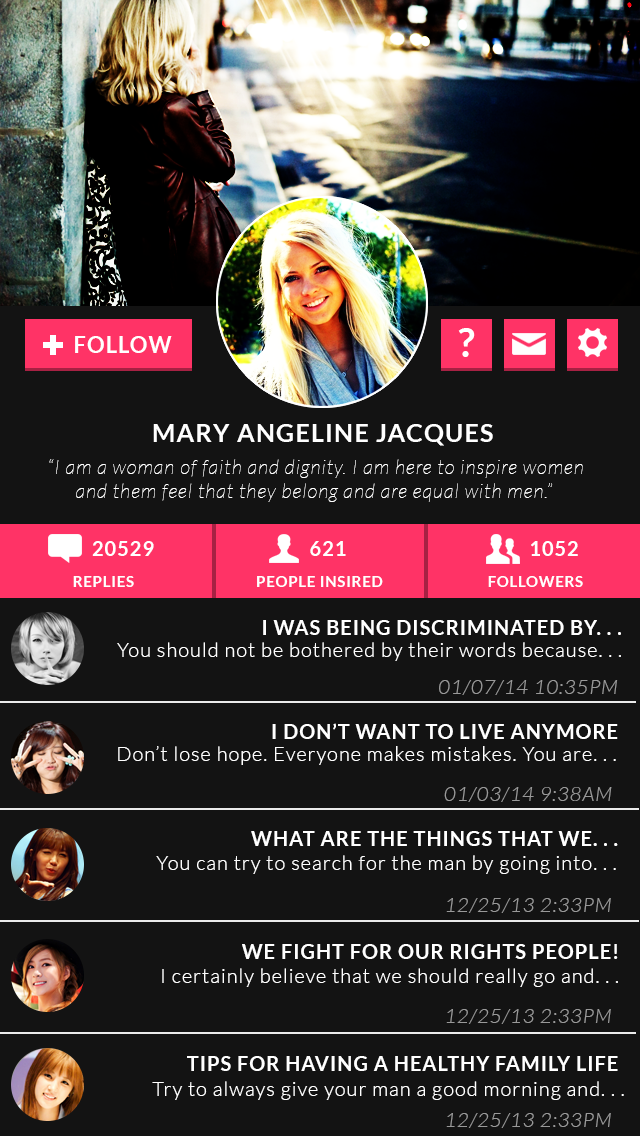
<style>
.page{position:relative;width:640px;height:1136px;background:#131313}
.page>*{position:absolute;margin:0}
.t1{font:40px "Lato-Bold";letter-spacing:0.05em;color:#ffffff}
.t2{font:22px "Lato-Bold";letter-spacing:0.05em;color:#ffffff}
.t3{font:25px "Lato-Bold";letter-spacing:0.05em;color:#ffffff}
.t4{font:20px "Lato-HairlineItalic";letter-spacing:0.05em;color:#ffffff}
.t5{font:20px "Lato-Bold";letter-spacing:0.05em;color:#ffffff}
.t6{font:15px "Lato-Bold";letter-spacing:0.05em;color:#ffffff}
.t7{font:20px "Lato-Light";letter-spacing:0.05em;color:#ffffff}
.t8{font:20px "Lato-LightItalic";letter-spacing:0.05em;color:#999999}
</style>
<div class="page">
<p class="t1" style="left:458px;top:328px;width:17px;height:29px">?</p>
<p class="t2" style="left:75px;top:336px;width:97px;height:17px">FOLLOW</p>
<p class="t3" style="left:153px;top:424px;width:340px;height:22px">MARY ANGELINE JACQUES</p>
<p class="t4" style="left:49px;top:459px;width:534px;height:43px;text-align:center">“I am a woman of faith and dignity. I am here to inspire women<br>and them feel that they belong and are equal with men.”</p>
<p class="t5" style="left:92px;top:541px;width:62px;height:15px">20529</p>
<p class="t5" style="left:310px;top:541px;width:36px;height:15px">621</p>
<p class="t5" style="left:531px;top:541px;width:47px;height:15px">1052</p>
<p class="t6" style="left:73px;top:576px;width:61px;height:11px">REPLIES</p>
<p class="t6" style="left:257px;top:576px;width:126px;height:11px">PEOPLE INSIRED</p>
<p class="t6" style="left:488px;top:576px;width:95px;height:11px">FOLLOWERS</p>
<p class="t5" style="left:263px;top:620px;width:358px;height:15px">I WAS BEING DISCRIMINATED BY. . .</p>
<p class="t7" style="left:117px;top:642px;width:504px;height:19px">You should not be bothered by their words because. . .</p>
<p class="t8" style="left:439px;top:680px;width:179px;height:15px">01/07/14 10:35PM</p>
<p class="t5" style="left:272px;top:723px;width:346px;height:16px">I DON’T WANT TO LIVE ANYMORE</p>
<p class="t7" style="left:118px;top:746px;width:498px;height:19px">Don’t lose hope. Everyone makes mistakes. You are. . .</p>
<p class="t8" style="left:444px;top:787px;width:168px;height:15px">01/03/14 9:38AM</p>
<p class="t5" style="left:251px;top:831px;width:367px;height:15px">WHAT ARE THE THINGS THAT WE. . .</p>
<p class="t7" style="left:156px;top:855px;width:460px;height:19px">You can try to search for the man by going into. . .</p>
<p class="t8" style="left:446px;top:898px;width:165px;height:15px">12/25/13 2:33PM</p>
<p class="t5" style="left:242px;top:944px;width:376px;height:15px">WE FIGHT FOR OUR RIGHTS PEOPLE!</p>
<p class="t7" style="left:162px;top:968px;width:456px;height:19px">I certainly believe that we should really go and. . .</p>
<p class="t8" style="left:446px;top:1009px;width:165px;height:15px">12/25/13 2:33PM</p>
<p class="t5" style="left:187px;top:1056px;width:431px;height:15px">TIPS FOR HAVING A HEALTHY FAMILY LIFE</p>
<p class="t7" style="left:152px;top:1081px;width:472px;height:19px">Try to always give your man a good morning and. . .</p>
<p class="t8" style="left:446px;top:1113px;width:165px;height:15px">12/25/13 2:33PM</p>
</div>
